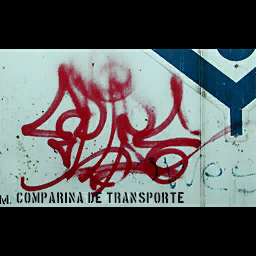
<style>
.page{position:relative;width:256px;height:256px;background:#000000}
.page>*{position:absolute;margin:0}
.t1{font:12.3px "BostonTraffic";letter-spacing:0.05em;color:#100c10;scale:1.03 1}
</style>
<div class="page">
<p class="t1" style="left:16px;top:192px;width:168px;height:12px">comparina de transporte</p>
</div>
